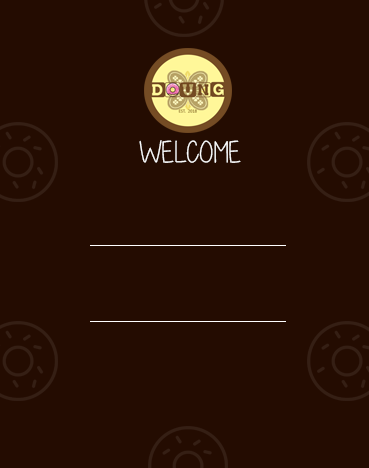
<style>
.page{position:relative;width:369px;height:468px;background:#240c01}
.page>*{position:absolute;margin:0}
.t1{font:30px "A-little-sunshine";color:#ffffff}
</style>
<div class="page">
<p class="t1" style="left:139px;top:140px;width:102px;height:23px">WELCOME</p>
</div>
